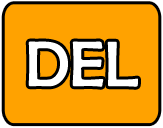
<style>
.page{position:relative;width:163px;height:128px;background:#ffa200}
.page>*{position:absolute;margin:0}
.t1{font:65px "BerlinSansFB-Reg";color:#ffffff}
</style>
<div class="page">
<p class="t1" style="left:28px;top:41px;width:110px;height:46px">DEL</p>
</div>
